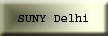
<style>
.page{position:relative;width:108px;height:36px}
.page>*{position:absolute;margin:0}
.t1{font:12px "Courier";color:#000000}
</style>
<div class="page">
<p class="t1" style="left:18px;top:14px;width:70px;height:8px">SUNY Delhi</p>
</div>
